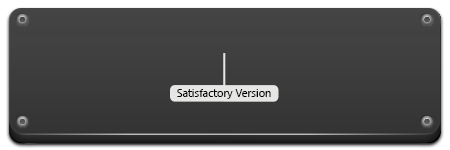
<style>
.page{position:relative;width:450px;height:150px}
.page>*{position:absolute;margin:0}
.t1{font:11px "SegoeUI";color:#000000}
</style>
<div class="page">
<p class="t1" style="left:177px;top:89px;width:94px;height:10px">Satisfactory Version</p>
</div>
